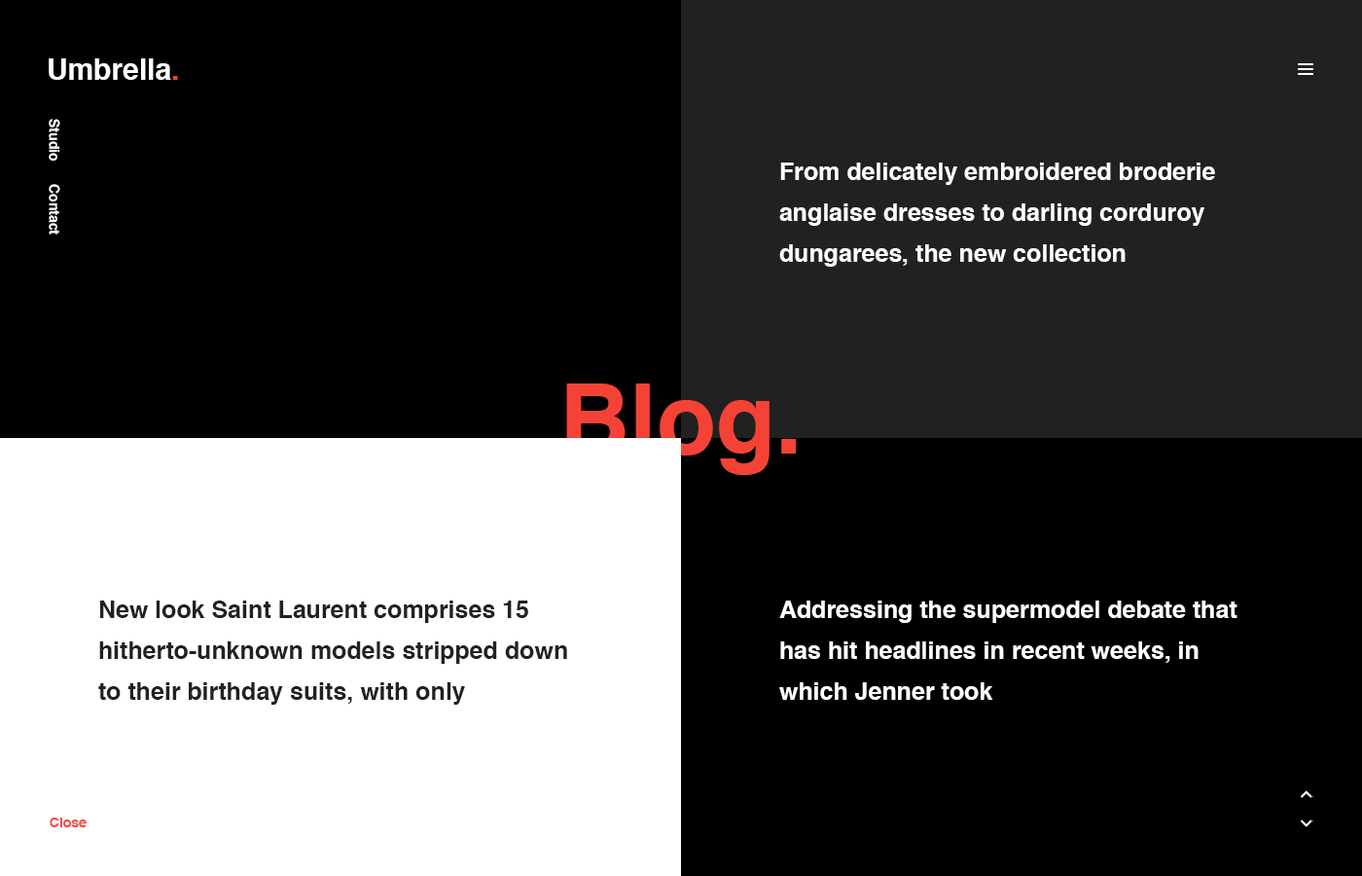
<style>
.page{position:relative;width:1362px;height:876px;background:#000000}
.page>*{position:absolute;margin:0}
.t1{font:29.2px "Helvetica-Bold";color:#ffffff}
.t2{font:29.2px "Helvetica-Bold";color:#f44336}
.t3{font:13.6px "Helvetica-Bold";color:#ffffff}
.t4{font:24.3px/40.9px "Helvetica-Bold";color:#ffffff}
.t5{font:97.3px "Helvetica-Bold";color:#f44336}
.t6{font:24.3px/40.9px "Helvetica-Bold";color:#212121}
.t7{font:13.6px "Helvetica-Bold";color:#f44336}
</style>
<div class="page">
<p class="t1" style="left:49px;top:58px;width:129px;height:22px">Umbrella<span class="t2">.</span></p>
<p class="t3" style="left:49px;top:119px;width:11px;height:115px;rotate:90deg">Studio      Contact</p>
<p class="t4" style="left:779px;top:162px;width:436px;height:105px">From delicately embroidered broderie <br>anglaise dresses to darling corduroy <br>dungarees, the new collection</p>
<p class="t5" style="left:566px;top:383px;width:230px;height:92px">Blog.</p>
<p class="t6" style="left:98px;top:600px;width:469px;height:104px">New look Saint Laurent comprises 15 hitherto-unknown models stripped down to their birthday suits, with only</p>
<p class="t4" style="left:779px;top:600px;width:458px;height:99px">Addressing the supermodel debate that has hit headlines in recent weeks, in which Jenner took</p>
<p class="t7" style="left:50px;top:817px;width:37px;height:10px">Close</p>
</div>
